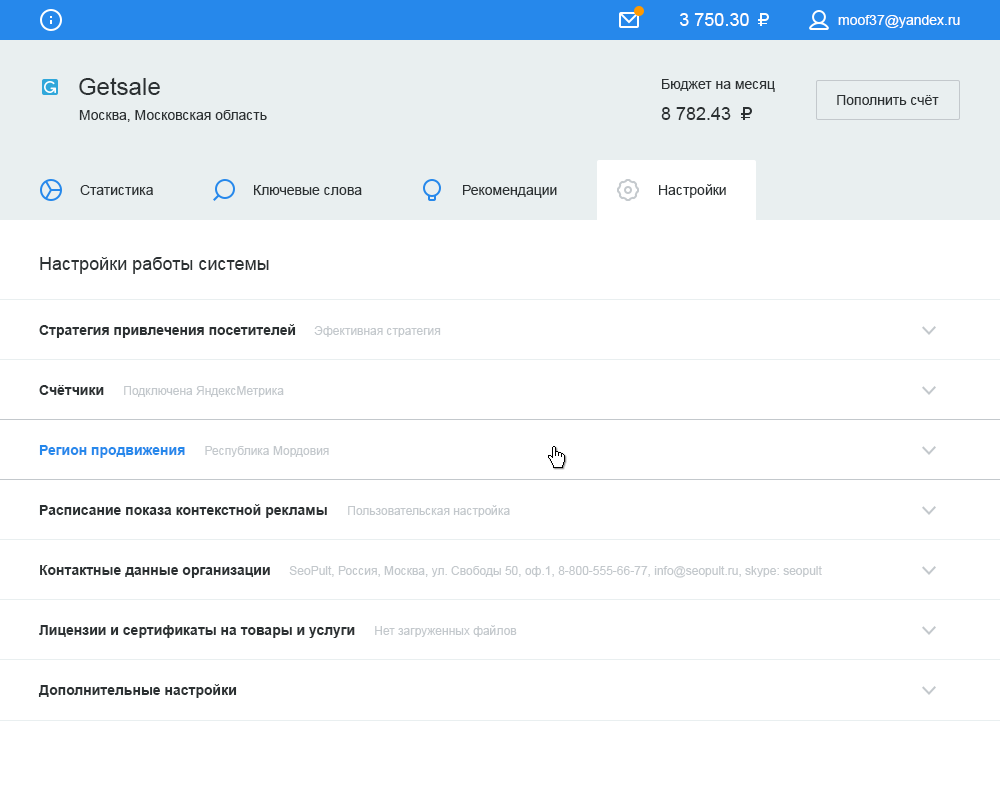
<style>
.page{position:relative;width:1000px;height:800px;background:#ffffff}
.page>*{position:absolute;margin:0}
.t1{font:18px "ArialMT";color:#ffffff}
.t2{font:14px "ArialMT";color:#ffffff}
.t3{font:24px "ArialMT";color:#2c3133}
.t4{font:14px "ArialMT";color:#2c3133}
.t5{font:18px "ArialMT";color:#2c3133}
.t6{font:14px "Arial-BoldMT";color:#2c3133}
.t7{font:12px "ArialMT";color:#c3c8cc}
.t8{font:14px "Arial-BoldMT";color:#2688eb}
</style>
<div class="page">
<p class="t1" style="left:680px;top:13px;width:69px;height:13px">3 750.30</p>
<p class="t2" style="left:838px;top:15px;width:122px;height:13px">moof37@yandex.ru</p>
<p class="t3" style="left:79px;top:77px;width:81px;height:18px">Getsale</p>
<p class="t4" style="left:662px;top:79px;width:113px;height:13px">Бюджет на месяц</p>
<p class="t4" style="left:837px;top:95px;width:102px;height:10px">Пополнить счёт</p>
<p class="t4" style="left:79px;top:110px;width:188px;height:12px">Москва, Московская область</p>
<p class="t5" style="left:661px;top:107px;width:70px;height:13px">8 782.43</p>
<p class="t4" style="left:80px;top:185px;width:73px;height:10px">Статистика</p>
<p class="t4" style="left:254px;top:185px;width:108px;height:10px">Ключевые слова</p>
<p class="t4" style="left:463px;top:185px;width:94px;height:13px">Рекомендации</p>
<p class="t4" style="left:659px;top:184px;width:67px;height:14px">Настройки</p>
<p class="t5" style="left:40px;top:257px;width:229px;height:17px">Настройки работы системы</p>
<p class="t6" style="left:39px;top:324px;width:257px;height:14px">Стратегия привлечения посетителей</p>
<p class="t7" style="left:314px;top:326px;width:127px;height:11px">Эфективная стратегия</p>
<p class="t6" style="left:39px;top:385px;width:65px;height:10px">Счётчики</p>
<p class="t7" style="left:124px;top:386px;width:160px;height:11px">Подключена ЯндексМетрика</p>
<p class="t8" style="left:39px;top:445px;width:146px;height:13px">Регион продвижения</p>
<p class="t7" style="left:205px;top:446px;width:124px;height:11px">Республика Мордовия</p>
<p class="t6" style="left:39px;top:504px;width:288px;height:14px">Расписание показа контекстной рекламы</p>
<p class="t7" style="left:348px;top:505px;width:162px;height:12px">Пользовательская настройка</p>
<p class="t6" style="left:40px;top:565px;width:230px;height:13px">Контактные данные организации</p>
<p class="t7" style="left:289px;top:566px;width:533px;height:12px">SeoPult, Россия, Москва, ул. Свободы 50, оф.1, 8-800-555-66-77, info@seopult.ru, skype: seopult</p>
<p class="t6" style="left:39px;top:625px;width:316px;height:13px">Лицензии и сертификаты на товары и услуги</p>
<p class="t7" style="left:375px;top:625px;width:142px;height:12px">Нет загруженных файлов</p>
<p class="t6" style="left:38px;top:684px;width:199px;height:14px">Дополнительные настройки</p>
</div>
